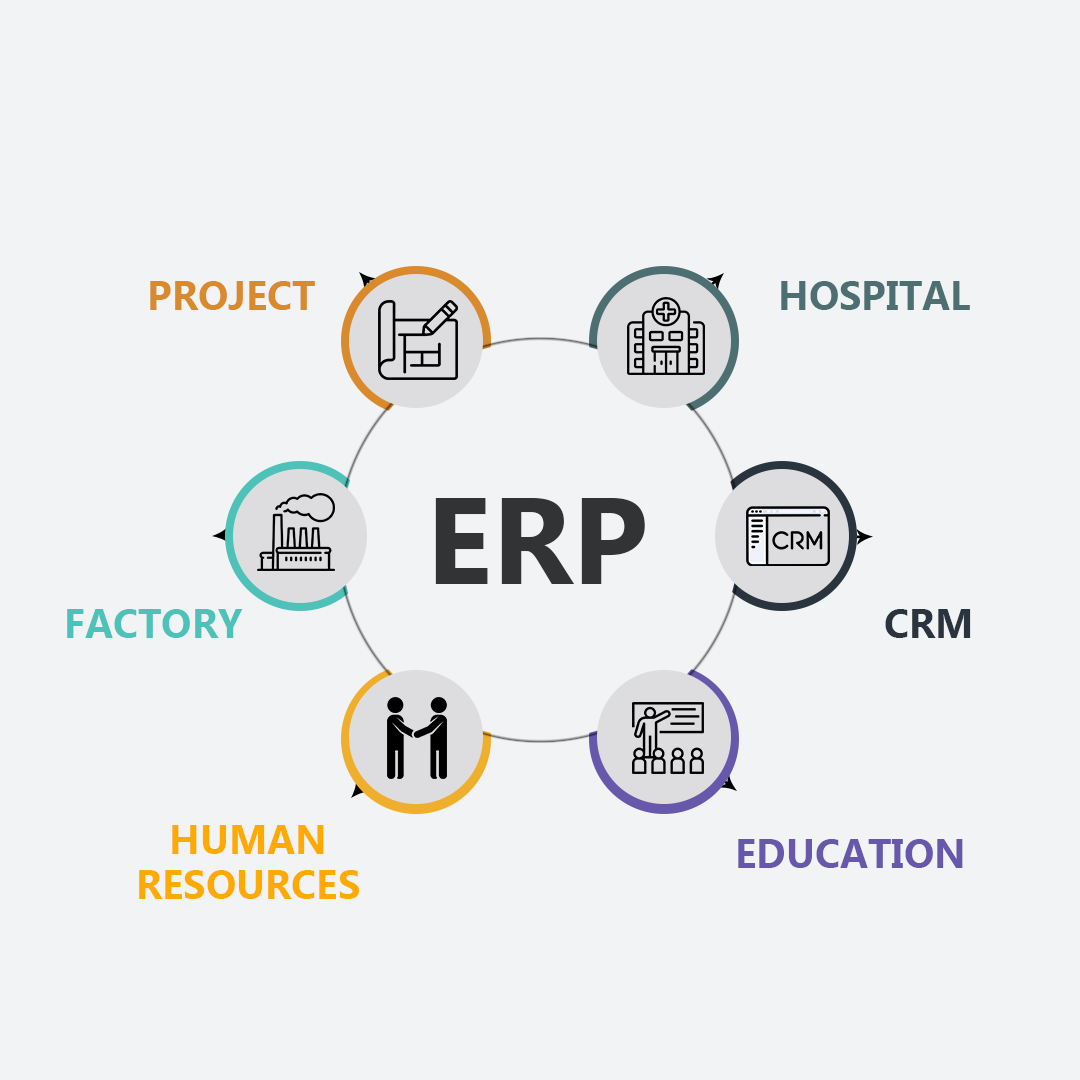
<style>
.page{position:relative;width:1080px;height:1080px;background:#f2f3f5}
.page>*{position:absolute;margin:0}
.t1{font:40px "MyanmarText-Bold";color:#d88a2d;text-transform:uppercase}
.t2{font:40px "MyanmarText-Bold";color:#4d6f71;text-transform:uppercase}
.t3{font:122.6px "MyanmarText-Bold";color:#323335}
.t4{font:40px "MyanmarText-Bold";color:#4ec2b8;text-transform:uppercase}
.t5{font:40px "MyanmarText-Bold";color:#29343e}
.t6{font:40px/45px "MyanmarText-Bold";color:#feaa00;text-transform:uppercase}
.t7{font:40px "MyanmarText-Bold";color:#6758ac;text-transform:uppercase}
</style>
<div class="page">
<p class="t1" style="left:150px;top:281px;width:165px;height:29px">Project</p>
<p class="t2" style="left:781px;top:281px;width:189px;height:29px">Hospital</p>
<p class="t3" style="left:435px;top:498px;width:210px;height:86px">ERP</p>
<p class="t4" style="left:67px;top:609px;width:176px;height:29px">Factory</p>
<p class="t5" style="left:885px;top:609px;width:86px;height:29px">CRM</p>
<p class="t6" style="left:139px;top:825px;width:220px;height:74px;text-align:center">Human<br>Resources</p>
<p class="t7" style="left:738px;top:839px;width:225px;height:29px">Education</p>
</div>
